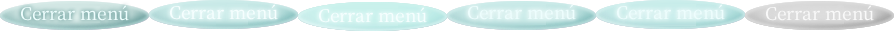
<style>
.page{position:relative;width:894px;height:31px;background:#ffffff}
.page>*{position:absolute;margin:0}
.t1{font:21px "OfficialFateFont-Medium";color:#edfdfd}
.t2{font:21px "OfficialFateFont-Medium";color:#f5fefe}
.t3{font:21px "OfficialFateFont-Medium";color:#f9f9f9}
</style>
<div class="page">
<p class="t1" style="left:20px;top:5px;width:109px;height:16px">Cerrar menú</p>
<p class="t2" style="left:169px;top:4px;width:109px;height:16px">Cerrar menú</p>
<p class="t1" style="left:467px;top:4px;width:109px;height:16px">Cerrar menú</p>
<p class="t1" style="left:616px;top:4px;width:109px;height:16px">Cerrar menú</p>
<p class="t3" style="left:765px;top:5px;width:109px;height:16px">Cerrar menú</p>
<p class="t2" style="left:318px;top:7px;width:109px;height:16px">Cerrar menú</p>
</div>
